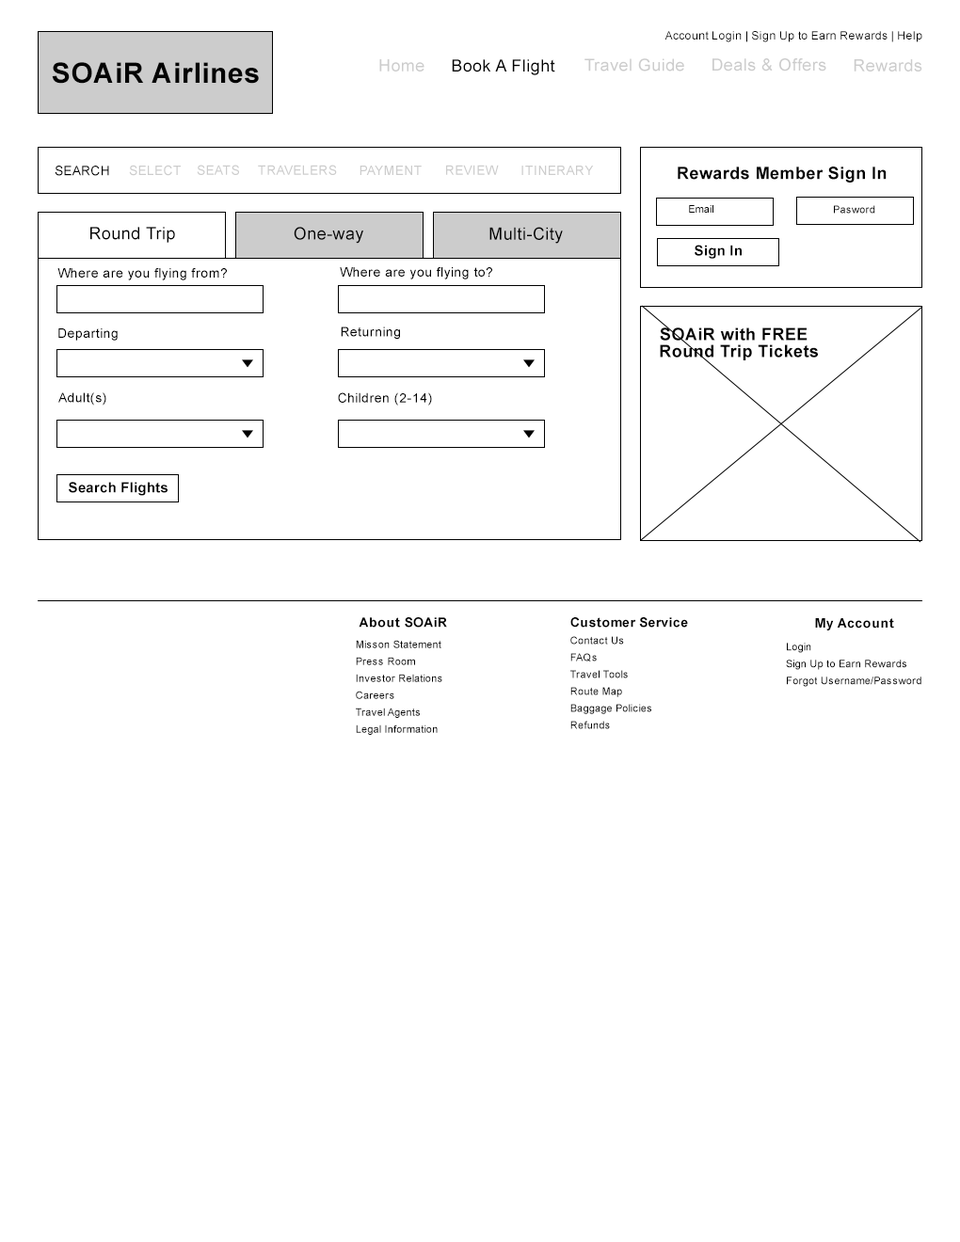
<style>
.page{position:relative;width:960px;height:1242px;background:#ffffff}
.page>*{position:absolute;margin:0}
.t1{font:11.3px "ArialMT";letter-spacing:0.025em;color:#030303}
.t2{font:28.2px "Arial-BoldMT";letter-spacing:0.025em;color:#030303}
.t3{font:16.7px "ArialMT";letter-spacing:0.025em;color:#cccccc}
.t4{font:16.7px "ArialMT";letter-spacing:0.025em;color:#000000}
.t5{font:13.2px "ArialMT";letter-spacing:0.025em;color:#000000}
.t6{font:13.2px "ArialMT";letter-spacing:0.025em;color:#cccccc}
.t7{font:16.9px "Arial-BoldMT";letter-spacing:0.025em;color:#000000}
.t8{font:10.4px "ArialMT";letter-spacing:0.025em;color:#000000}
.t9{font:16.9px "ArialMT";letter-spacing:0.025em;color:#000000}
.t10{font:14.1px "Arial-BoldMT";letter-spacing:0.025em;color:#000000}
.t11{font:16.9px/16.9px "Arial-BoldMT";letter-spacing:0.025em;color:#000000}
.t12{font:13.2px "Arial-BoldMT";letter-spacing:0.025em;color:#000000}
.t13{font:10.4px/16.9px "ArialMT";letter-spacing:0.025em;color:#000000}
</style>
<div class="page">
<p class="t1" style="left:664px;top:31px;width:258px;height:11px">Account Login | Sign Up to Earn Rewards | Help</p>
<p class="t2" style="left:52px;top:62px;width:207px;height:22px">SOAiR Airlines</p>
<p class="t3" style="left:379px;top:59px;width:45px;height:13px">Home</p>
<p class="t4" style="left:452px;top:59px;width:103px;height:16px">Book A Flight</p>
<p class="t3" style="left:584px;top:58px;width:100px;height:14px">Travel Guide</p>
<p class="t3" style="left:712px;top:58px;width:114px;height:14px">Deals &amp; Offers</p>
<p class="t3" style="left:854px;top:59px;width:68px;height:13px">Rewards</p>
<p class="t5" style="left:55px;top:166px;width:54px;height:10px">SEARCH</p>
<p class="t6" style="left:129px;top:165px;width:52px;height:11px">SELECT</p>
<p class="t6" style="left:197px;top:165px;width:42px;height:10px">SEATS</p>
<p class="t6" style="left:258px;top:165px;width:79px;height:10px">TRAVELERS</p>
<p class="t6" style="left:359px;top:166px;width:63px;height:9px">PAYMENT</p>
<p class="t6" style="left:446px;top:165px;width:53px;height:10px">REVIEW</p>
<p class="t6" style="left:521px;top:166px;width:73px;height:9px">ITINERARY</p>
<p class="t7" style="left:678px;top:167px;width:209px;height:16px">Rewards Member Sign In</p>
<p class="t8" style="left:689px;top:205px;width:24px;height:8px">Email</p>
<p class="t8" style="left:834px;top:205px;width:41px;height:9px">Pasword</p>
<p class="t9" style="left:90px;top:227px;width:85px;height:16px">Round Trip</p>
<p class="t9" style="left:294px;top:227px;width:69px;height:17px">One-way</p>
<p class="t9" style="left:489px;top:227px;width:74px;height:17px">Multi-City</p>
<p class="t10" style="left:695px;top:245px;width:47px;height:14px">Sign In</p>
<p class="t5" style="left:57px;top:268px;width:170px;height:12px">Where are you flying from?</p>
<p class="t5" style="left:340px;top:267px;width:152px;height:13px">Where are you flying to?</p>
<p class="t5" style="left:58px;top:328px;width:60px;height:13px">Departing</p>
<p class="t5" style="left:341px;top:327px;width:59px;height:13px">Returning</p>
<p class="t11" style="left:660px;top:327px;width:158px;height:33px;text-align:center">SOAiR with FREE <br> Round Trip Tickets</p>
<p class="t5" style="left:58px;top:392px;width:48px;height:14px">Adult(s)</p>
<p class="t5" style="left:338px;top:392px;width:94px;height:14px">Children (2-14)</p>
<p class="t10" style="left:69px;top:482px;width:99px;height:14px">Search Flights</p>
<p class="t12" style="left:359px;top:617px;width:88px;height:11px">About SOAiR</p>
<p class="t12" style="left:570px;top:617px;width:118px;height:11px">Customer Service</p>
<p class="t12" style="left:815px;top:618px;width:79px;height:13px">My Account</p>
<p class="t13" style="left:356px;top:640px;width:86px;height:95px">Misson Statement<br>Press Room<br>Investor Relations <br>Careers<br>Travel Agents<br>Legal Information</p>
<p class="t13" style="left:570px;top:636px;width:81px;height:93px">Contact Us<br>FAQs<br>Travel Tools<br>Route Map<br>Baggage Policies<br>Refunds</p>
<p class="t13" style="left:786px;top:643px;width:135px;height:44px">Login<br>Sign Up to Earn Rewards<br>Forgot Username/Password</p>
</div>
